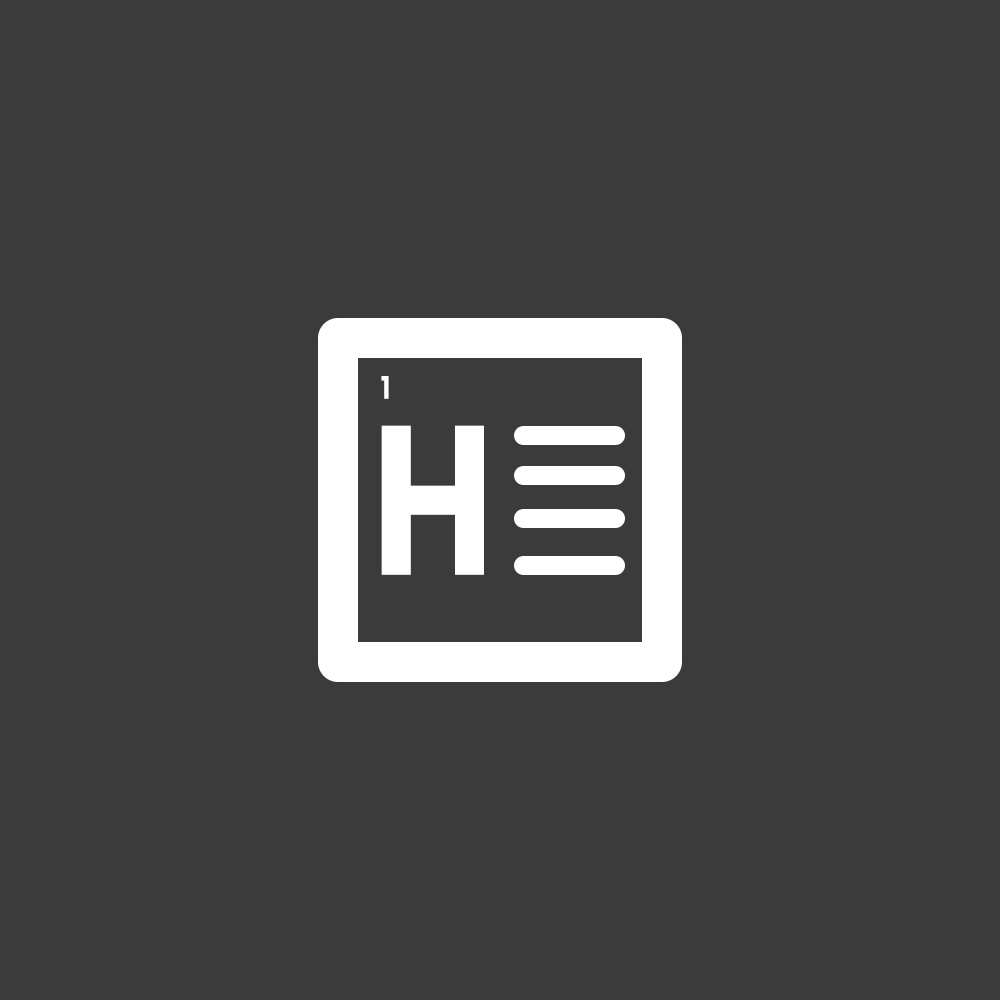
<style>
.page{position:relative;width:1000px;height:1000px;background:#3b3b3b}
.page>*{position:absolute;margin:0}
.t1{font:31px "Hansief";letter-spacing:0.005em;color:#ffffff}
.t2{font:203px "Hansief";letter-spacing:0.005em;color:#ffffff}
</style>
<div class="page">
<p class="t1" style="left:381px;top:376px;width:8px;height:23px">1</p>
<p class="t2" style="left:381px;top:425px;width:103px;height:150px">H</p>
</div>
